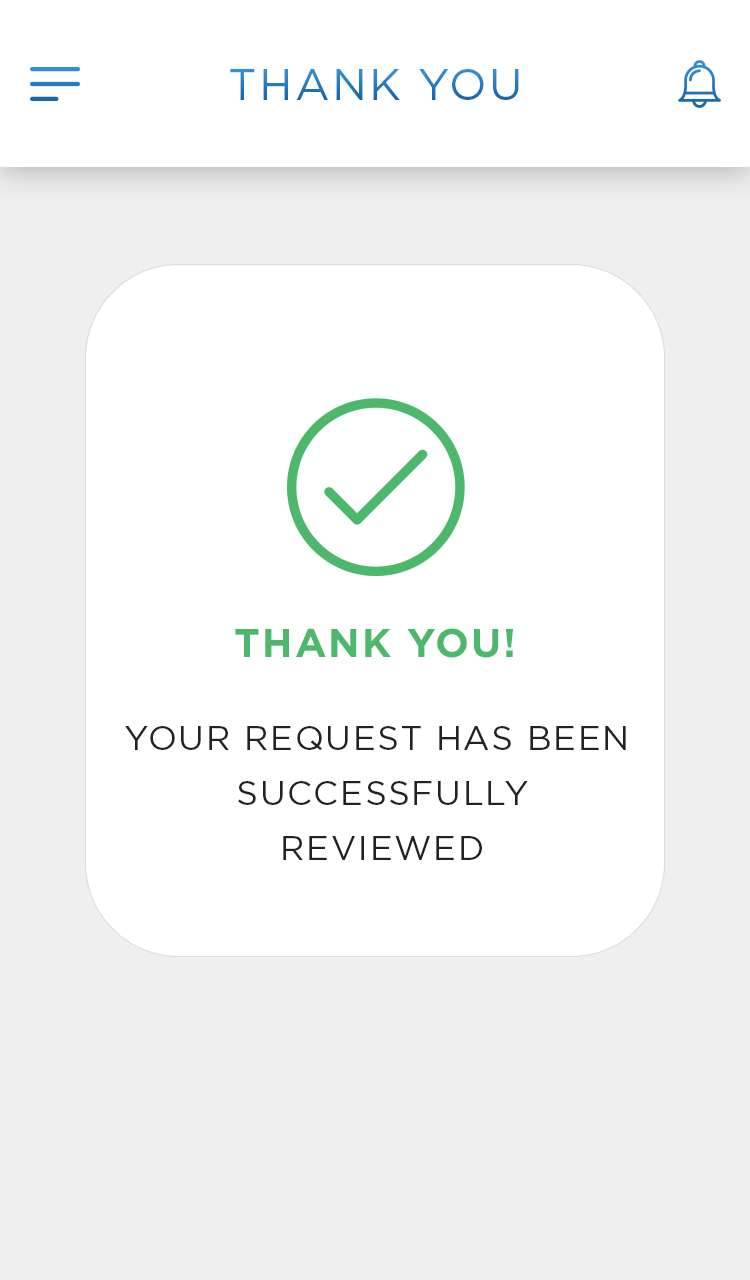
<style>
.page{position:relative;width:750px;height:1280px;background:#ffffff}
.page>*{position:absolute;margin:0}
.t1{font:44px "Gotham-Book";letter-spacing:0.05em;color:#257bc1;text-transform:uppercase}
.t2{font:40px "Gotham-Bold";letter-spacing:0.05em;color:#4db86b;text-transform:uppercase}
.t3{font:34px/55px "Gotham-Book";letter-spacing:0.05em;color:#222222;text-transform:uppercase}
</style>
<div class="page">
<p class="t1" style="left:230px;top:69px;width:289px;height:31px">THANK YOU</p>
<p class="t2" style="left:235px;top:628px;width:278px;height:30px">THANK YOU!</p>
<p class="t3" style="left:125px;top:726px;width:501px;height:134px;text-align:center">Your request has been<br> successfully<br> reviewed</p>
</div>
